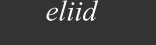
<style>
.page{position:relative;width:156px;height:45px;background:#333333}
.page>*{position:absolute;margin:0}
.t1{font:36px "Vijaya";color:#fcfbfb}
</style>
<div class="page">
<p class="t1" style="left:46px;top:0px;width:53px;height:21px">eliid</p>
</div>
